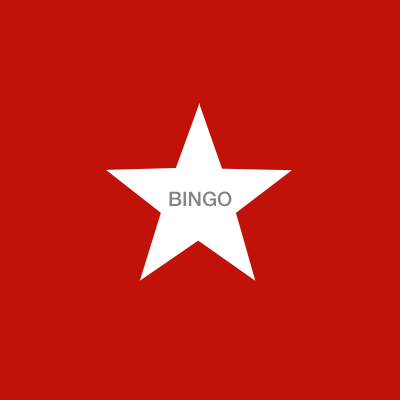
<style>
.page{position:relative;width:400px;height:400px;background:#c01209}
.page>*{position:absolute;margin:0}
.t1{font:20px "HelveticaNeue-Medium";color:#848484}
</style>
<div class="page">
<p class="t1" style="left:169px;top:191px;width:63px;height:16px">BINGO</p>
</div>
